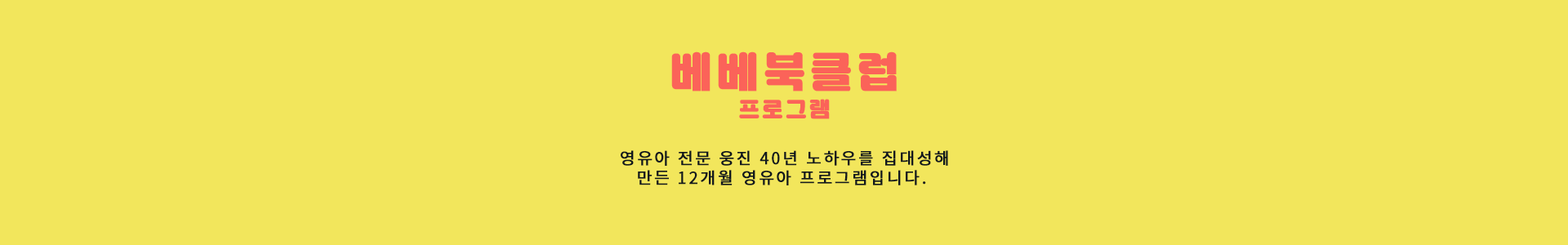
<style>
.page{position:relative;width:1568px;height:245px;background:#f2e65c}
.page>*{position:absolute;margin:0}
.t1{font:40.8px "Jalnan";letter-spacing:0.12em;color:#fb6359;font-weight:bold}
.t2{font:20.4px "Jalnan";letter-spacing:0.12em;color:#fb6359;font-weight:bold}
.t3{font:16.3px/19.6px "NotoSansKR-Regular";letter-spacing:0.12em;color:#11181d;font-weight:bold}
</style>
<div class="page">
<p class="t1" style="left:671px;top:51px;width:226px;height:40px">베베북클럽</p>
<p class="t2" style="left:739px;top:99px;width:91px;height:20px">프로그램</p>
<p class="t3" style="left:621px;top:150px;width:327px;height:35px;text-align:center">영유아 전문 웅진 40년 노하우를 집대성해<br>만든 12개월 영유아 프로그램입니다.</p>
</div>
